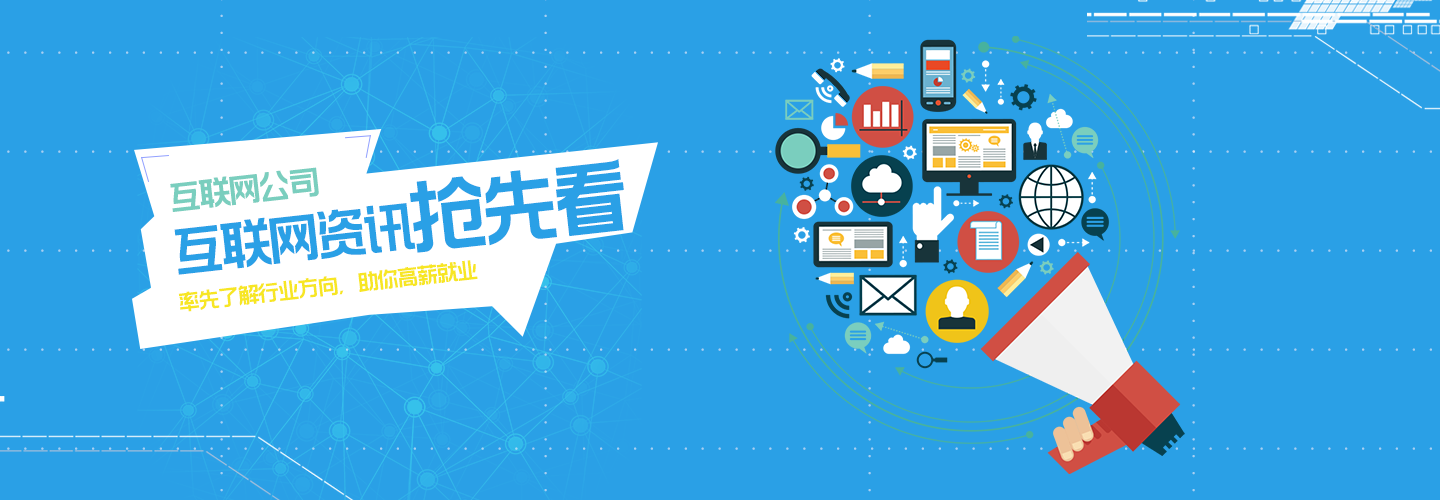
<style>
.page{position:relative;width:1440px;height:500px;background:#2aa0e6}
.page>*{position:absolute;margin:0}
.t1{font:48px "MF-FangHei-Noncommercial-Regular";color:#2aa0e6}
.t2{font:72px "MF-FangHei-Noncommercial-Regular";color:#2aa0e6}
.t3{font:30px "MF-FangHei-Noncommercial-Regular";color:#7acebe}
.t4{font:20px "MF-FangHei-Noncommercial-Regular";color:#f7e624}
</style>
<div class="page">
<p class="t1" style="left:174px;top:159px;width:450px;height:116px;rotate:-6deg">互联网资讯<span class="t2">抢先看</span></p>
<p class="t3" style="left:170px;top:167px;width:149px;height:45px;rotate:-6deg">互联网公司</p>
<p class="t4" style="left:178px;top:260px;width:300px;height:52px;rotate:-6deg">率先了解行业方向，助你高薪就业</p>
</div>
